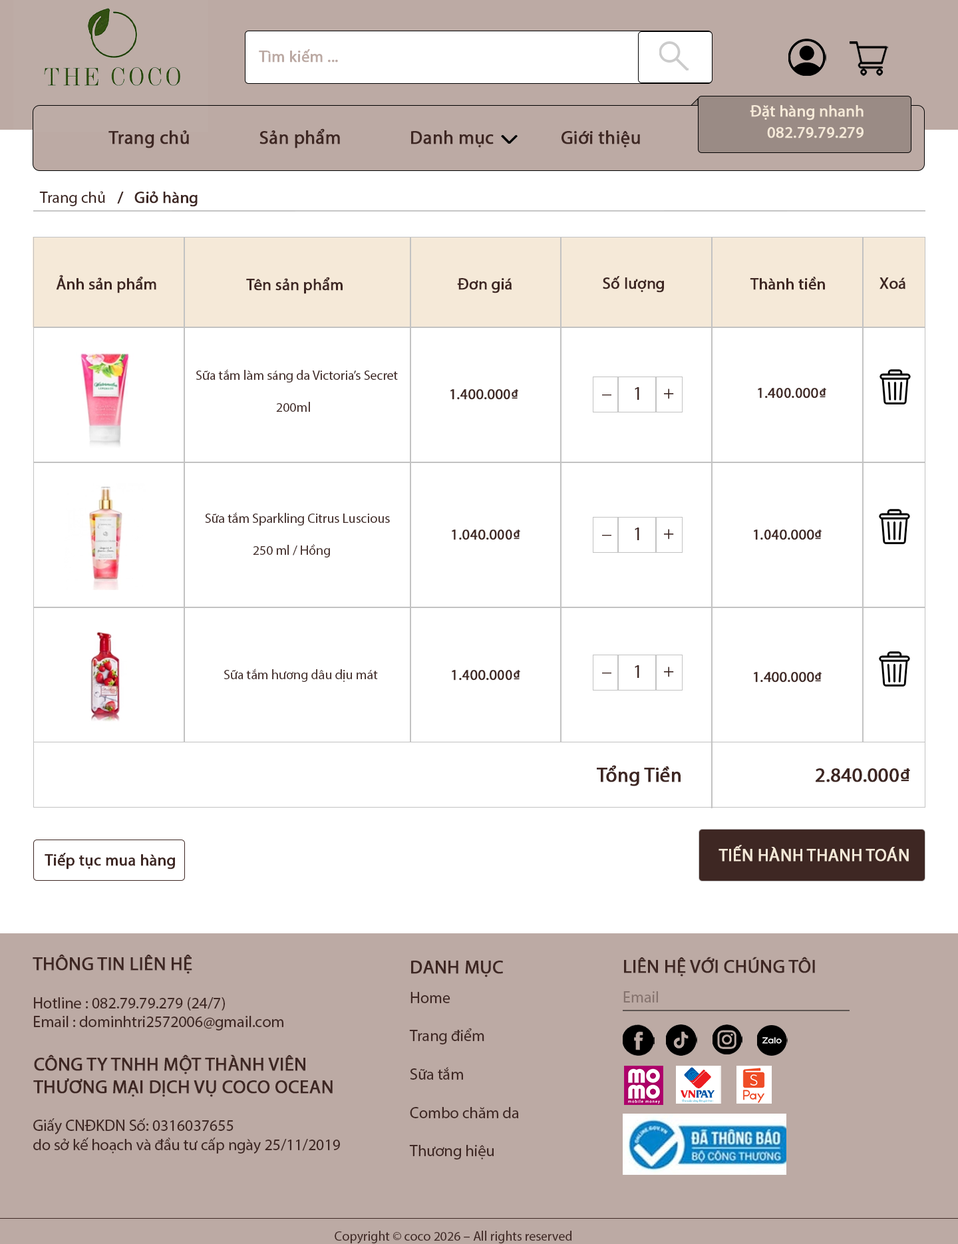
<style>
.page{position:relative;width:958px;height:1244px;background:#ffffff}
.page>*{position:absolute;margin:0}
.t1{font:16px "MyriadPro-Regular";color:#bcaaa4;font-weight:bold}
.t2{font:16px "MyriadPro-Regular";color:#f5e9d8;font-weight:bold}
.t3{font:18.6px "MyriadPro-Regular";color:#3e2723;font-weight:bold}
.t4{font:16px "MyriadPro-Regular";color:#3e2723;font-weight:bold}
.t5{font:16px "MyriadPro-Regular";color:#3e2723}
.t6{font:13.3px "MyriadPro-Regular";color:#3e2723}
.t7{font:14.6px "MyriadPro-Regular";color:#3e2723;font-weight:bold}
.t8{font:18.6px "MyriadPro-Regular";color:#3e2723}
.t9{font:20px "MyriadPro-Regular";color:#3e2723;font-weight:bold}
.t10{font:17.3px "MyriadPro-Regular";color:#f5e9d8;font-weight:bold}
.t11{font:16px "MyriadPro-Regular";color:#86746f}
</style>
<div class="page">
<p class="t1" style="left:259px;top:49px;width:79px;height:14px">Tìm kiếm ...</p>
<p class="t2" style="left:750px;top:105px;width:114px;height:15px">Đặt hàng nhanh</p>
<p class="t3" style="left:108px;top:130px;width:81px;height:18px">Trang chủ</p>
<p class="t3" style="left:260px;top:128px;width:80px;height:20px">Sản phẩm</p>
<p class="t3" style="left:411px;top:130px;width:83px;height:18px">Danh mục</p>
<p class="t3" style="left:562px;top:130px;width:78px;height:18px">Giới thiệu</p>
<p class="t2" style="left:767px;top:127px;width:97px;height:11px">082.79.79.279</p>
<p class="t4" style="left:39px;top:191px;width:159px;height:16px"><span class="t5">Trang chủ</span>   /   Giỏ hàng</p>
<p class="t4" style="left:56px;top:275px;width:100px;height:18px">Ảnh sản phẩm</p>
<p class="t4" style="left:246px;top:277px;width:97px;height:17px">Tên sản phẩm</p>
<p class="t4" style="left:457px;top:278px;width:55px;height:15px">Đơn giá</p>
<p class="t4" style="left:603px;top:276px;width:61px;height:17px">Số lượng</p>
<p class="t4" style="left:750px;top:277px;width:75px;height:13px">Thành tiền</p>
<p class="t4" style="left:880px;top:277px;width:26px;height:12px">Xoá</p>
<p class="t6" style="left:196px;top:369px;width:202px;height:43px">Sữa tắm làm sáng da Victoria’s Secret<br><br>      200ml</p>
<p class="t7" style="left:451px;top:389px;width:67px;height:11px">1.400.000₫</p>
<p class="t8" style="left:635px;top:387px;width:4px;height:13px">1</p>
<p class="t8" style="left:664px;top:389px;width:10px;height:10px">+</p>
<p class="t7" style="left:758px;top:388px;width:68px;height:11px">1.400.000₫</p>
<p class="t8" style="left:602px;top:395px;width:10px;height:1px">_</p>
<p class="t6" style="left:205px;top:512px;width:185px;height:46px">Sữa tắm Sparkling Citrus Luscious <br><br>  250 ml / Hồng</p>
<p class="t7" style="left:452px;top:530px;width:68px;height:10px">1.040.000₫</p>
<p class="t8" style="left:635px;top:528px;width:4px;height:12px">1</p>
<p class="t8" style="left:664px;top:529px;width:10px;height:11px">+</p>
<p class="t7" style="left:754px;top:530px;width:68px;height:10px">1.040.000₫</p>
<p class="t8" style="left:602px;top:535px;width:10px;height:1px">_</p>
<p class="t8" style="left:635px;top:665px;width:4px;height:13px">1</p>
<p class="t6" style="left:224px;top:669px;width:154px;height:13px">Sữa tắm hương dâu dịu mát</p>
<p class="t7" style="left:452px;top:670px;width:68px;height:11px">1.400.000₫</p>
<p class="t8" style="left:602px;top:673px;width:10px;height:1px">_</p>
<p class="t8" style="left:664px;top:667px;width:10px;height:10px">+</p>
<p class="t7" style="left:754px;top:672px;width:68px;height:11px">1.400.000₫</p>
<p class="t9" style="left:597px;top:765px;width:84px;height:22px">Tổng Tiền</p>
<p class="t9" style="left:816px;top:769px;width:94px;height:14px">2.840.000₫</p>
<p class="t10" style="left:719px;top:845px;width:190px;height:17px">TIẾN HÀNH THANH TOÁN</p>
<p class="t4" style="left:45px;top:853px;width:130px;height:17px">Tiếp tục mua hàng</p>
<p class="t5" style="left:33px;top:954px;width:250px;height:77px"><span class="t3">THÔNG TIN LIÊN HỆ <br><br></span>Hotline : 082.79.79.279 (24/7)<br>Email : dominhtri2572006@gmail.com</p>
<p class="t3" style="left:411px;top:961px;width:92px;height:17px">DANH MỤC</p>
<p class="t3" style="left:624px;top:957px;width:191px;height:20px">LIÊN HỆ VỚI CHÚNG TÔI</p>
<p class="t5" style="left:409px;top:992px;width:110px;height:168px">Home <br><br>Trang điểm <br><br>Sữa tắm <br><br>Combo chăm da<br><br>Thương hiệu</p>
<p class="t11" style="left:624px;top:992px;width:34px;height:11px">Email</p>
<p class="t3" style="left:33px;top:1055px;width:300px;height:42px">CÔNG TY TNHH MỘT THÀNH VIÊN <br>THƯƠNG MẠI DỊCH VỤ COCO OCEAN</p>
<p class="t5" style="left:33px;top:1119px;width:307px;height:36px">Giấy CNĐKDN Số: 0316037655 <br>do sở kế hoạch và đầu tư cấp ngày 25/11/2019</p>
<p class="t6" style="left:335px;top:1231px;width:237px;height:13px">Copyright © coco 2026 – All rights reserved</p>
</div>
